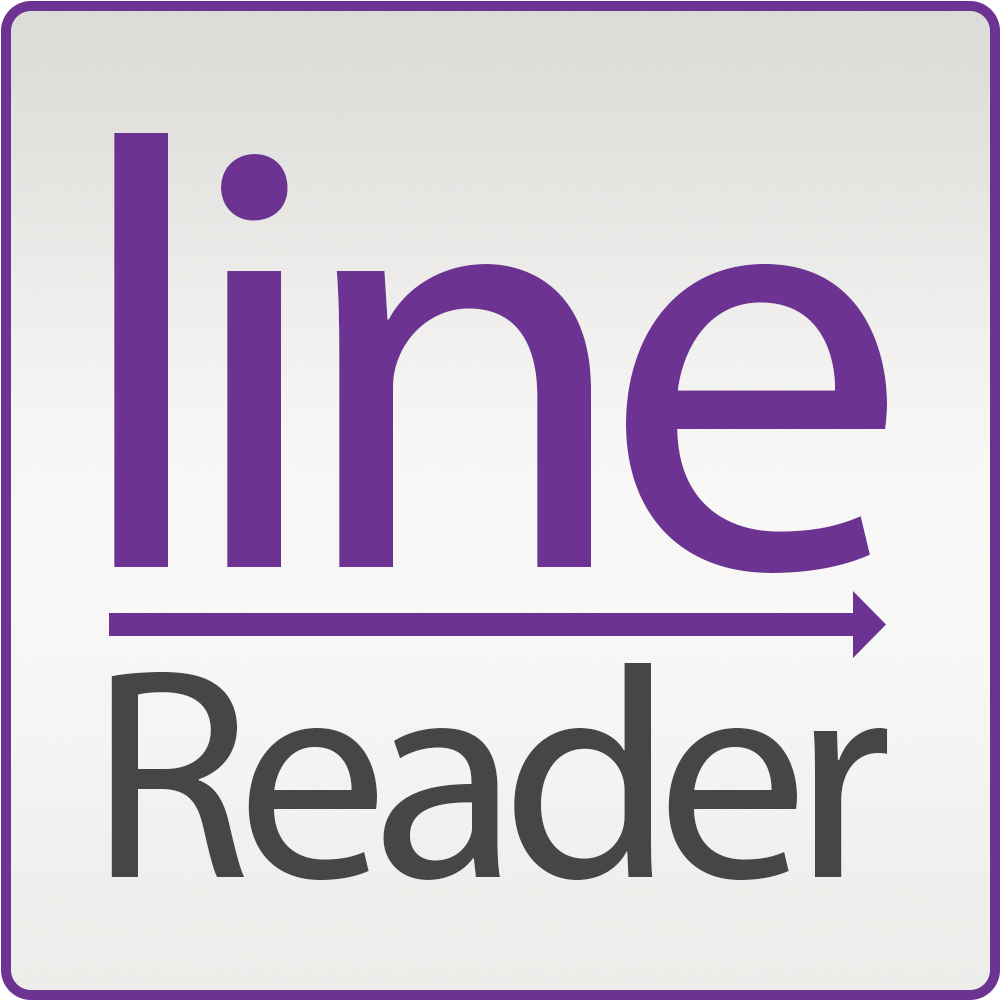
<style>
.page{position:relative;width:1000px;height:1000px;background:#6d3393}
.page>*{position:absolute;margin:0}
.t1{font:610.7px "MyriadPro-Regular";letter-spacing:-0.05em;color:#6d3393}
.t2{font:301.3px "MyriadPro-Regular";letter-spacing:-0.05em;color:#464646}
</style>
<div class="page">
<p class="t1" style="left:114px;top:133px;width:773px;height:440px">line</p>
<p class="t2" style="left:111px;top:663px;width:777px;height:218px">Reader</p>
</div>
